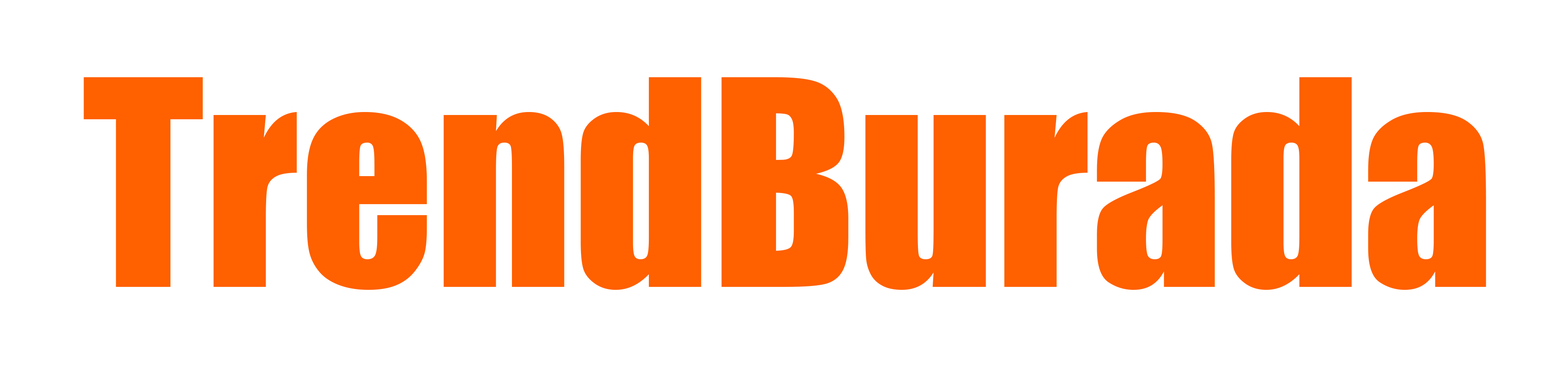
<style>
.page{position:relative;width:1568px;height:373px;background:#ffffff}
.page>*{position:absolute;margin:0}
.t1{font:264.9px "Impact";color:#ff6000}
</style>
<div class="page">
<p class="t1" style="left:83px;top:77px;width:1403px;height:212px">TrendBurada</p>
</div>
